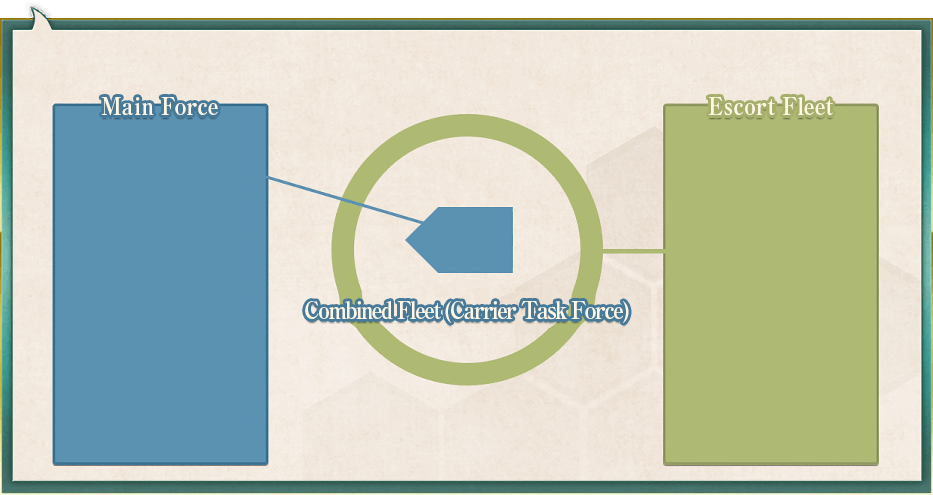
<style>
.page{position:relative;width:933px;height:495px}
.page>*{position:absolute;margin:0}
.t1{font:24px "RyuminPro-ExBold";color:#fff8e7;scale:0.9 1}
.t2{font:24px "RyuminPro-ExBold";letter-spacing:-0.08em;color:#fff8e7;scale:0.9 1}
</style>
<div class="page">
<p class="t1" style="left:101px;top:97px;width:117px;height:18px">Main Force</p>
<p class="t1" style="left:708px;top:97px;width:125px;height:19px">Escort Fleet</p>
<p class="t2" style="left:305px;top:301px;width:324px;height:22px">Combined Fleet (Carrier Task Force)</p>
</div>
